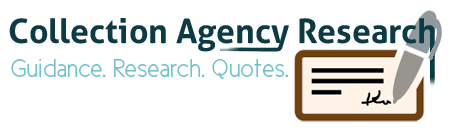
<style>
.page{position:relative;width:450px;height:138px;background:#ffffff}
.page>*{position:absolute;margin:0}
.t1{font:33.8px "Aller-Bold";color:#0c3a45}
.t2{font:25.8px "CicleSemi";color:#71c2d0}
</style>
<div class="page">
<p class="t1" style="left:9px;top:18px;width:426px;height:34px">Collection Agency Research</p>
<p class="t2" style="left:11px;top:59px;width:277px;height:20px">Guidance. Research. Quotes.</p>
</div>
